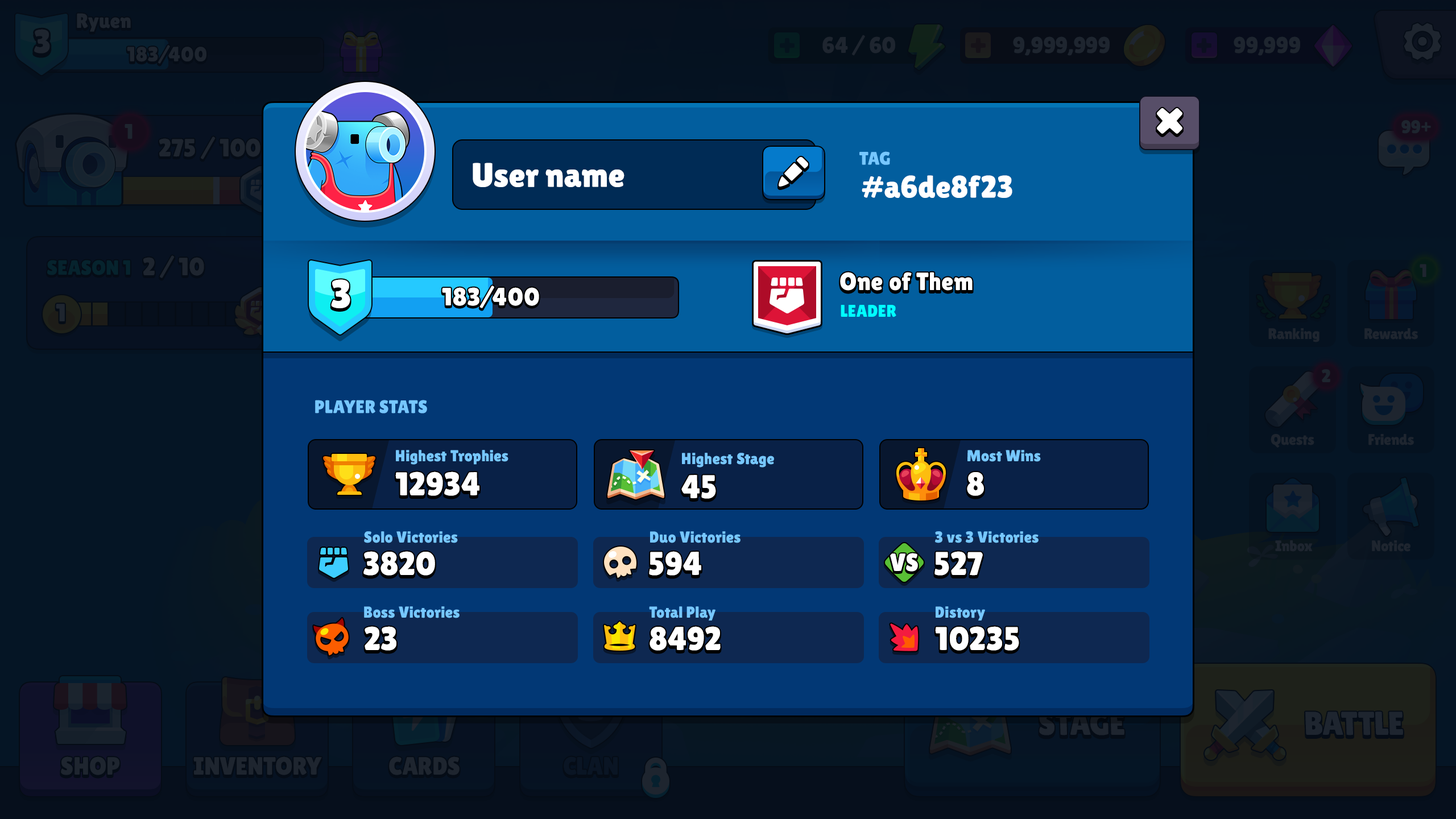
<style>
.page{position:relative;width:1456px;height:819px}
.page>*{position:absolute;margin:0}
.t1{font:18.2px "LilitaOne";color:#76c7ff;text-transform:uppercase}
.t2{font:34.1px "LilitaOne";color:#ffffff}
.t3{font:31.3px "LilitaOne";color:#ffffff}
.t4{font:39.8px "LilitaOne";color:#ffffff}
.t5{font:25px "LilitaOne";letter-spacing:0.02em;color:#ffffff}
.t6{font:17.1px "LilitaOne";letter-spacing:0.02em;color:#00ffff;text-transform:uppercase}
.t7{font:15.9px "LilitaOne";letter-spacing:0.02em;color:#76c7ff}
.t8{font:33px "LilitaOne";letter-spacing:0.02em;color:#ffffff}
.t9{font:25px "LilitaOne";color:#ffffff}
</style>
<div class="page">
<p class="t1" style="left:859px;top:151px;width:31px;height:14px">Tag</p>
<p class="t2" style="left:473px;top:163px;width:151px;height:24px">User name</p>
<p class="t3" style="left:862px;top:175px;width:150px;height:23px">#a6de8f23</p>
<p class="t4" style="left:331px;top:279px;width:19px;height:29px">3</p>
<p class="t5" style="left:840px;top:272px;width:133px;height:19px">One of Them</p>
<p class="t5" style="left:442px;top:286px;width:97px;height:22px">183/400</p>
<p class="t6" style="left:841px;top:305px;width:55px;height:12px">Leader</p>
<p class="t1" style="left:315px;top:400px;width:112px;height:13px">Player Stats</p>
<p class="t7" style="left:396px;top:450px;width:112px;height:15px">Highest Trophies</p>
<p class="t7" style="left:967px;top:450px;width:74px;height:12px">Most Wins</p>
<p class="t7" style="left:682px;top:453px;width:92px;height:15px">Highest Stage</p>
<p class="t8" style="left:395px;top:471px;width:84px;height:25px">12934</p>
<p class="t8" style="left:967px;top:472px;width:17px;height:24px">8</p>
<p class="t8" style="left:681px;top:475px;width:35px;height:24px">45</p>
<p class="t7" style="left:364px;top:531px;width:94px;height:12px">Solo Victories</p>
<p class="t7" style="left:650px;top:531px;width:91px;height:12px">Duo Victories</p>
<p class="t7" style="left:935px;top:531px;width:104px;height:12px">3 vs 3 Victories</p>
<p class="t8" style="left:363px;top:551px;width:72px;height:25px">3820</p>
<p class="t8" style="left:649px;top:551px;width:52px;height:25px">594</p>
<p class="t9" style="left:890px;top:555px;width:28px;height:18px">VS</p>
<p class="t9" style="left:890px;top:553px;width:28px;height:19px">VS</p>
<p class="t8" style="left:934px;top:551px;width:49px;height:25px">527</p>
<p class="t7" style="left:364px;top:606px;width:96px;height:12px">Boss Victories</p>
<p class="t7" style="left:649px;top:606px;width:66px;height:14px">Total Play</p>
<p class="t7" style="left:936px;top:606px;width:49px;height:14px">Distory</p>
<p class="t8" style="left:365px;top:626px;width:31px;height:25px">23</p>
<p class="t8" style="left:650px;top:626px;width:71px;height:25px">8492</p>
<p class="t8" style="left:935px;top:626px;width:84px;height:25px">10235</p>
</div>
